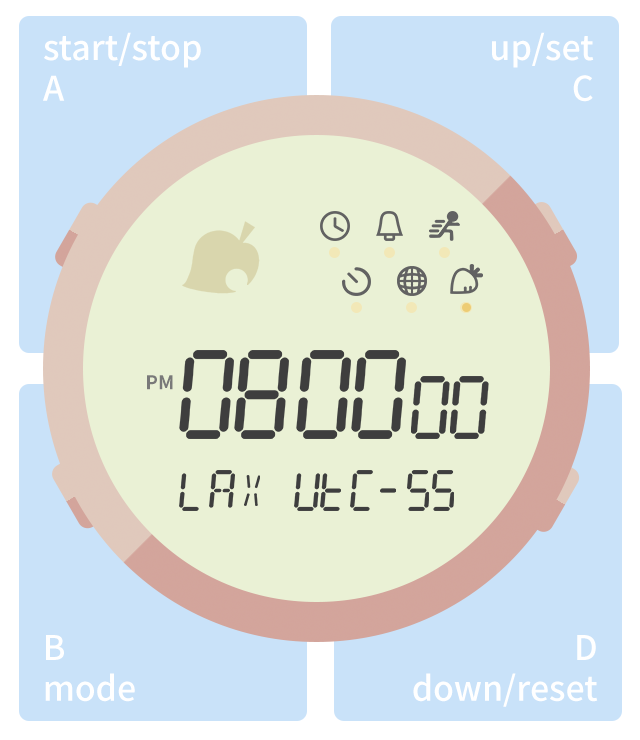
<style>
.page{position:relative;width:640px;height:740px;background:#c9e2f9}
.page>*{position:absolute;margin:0}
.t1{font:34px "SourceHanSansK-Medium";color:#ffffff}
.t2{font:19px "SourceHanSansK-Bold";color:#797979}
</style>
<div class="page">
<p class="t1" style="left:43px;top:32px;width:158px;height:69px">start/stop<br>A</p>
<p class="t1" style="left:492px;top:32px;width:102px;height:70px;text-align:right">up/set <br>C</p>
<p class="t2" style="left:147px;top:375px;width:26px;height:15px">PM</p>
<p class="t1" style="left:45px;top:635px;width:90px;height:67px">B<br>mode</p>
<p class="t1" style="left:413px;top:635px;width:185px;height:72px;text-align:right">D<br>down/reset</p>
</div>
